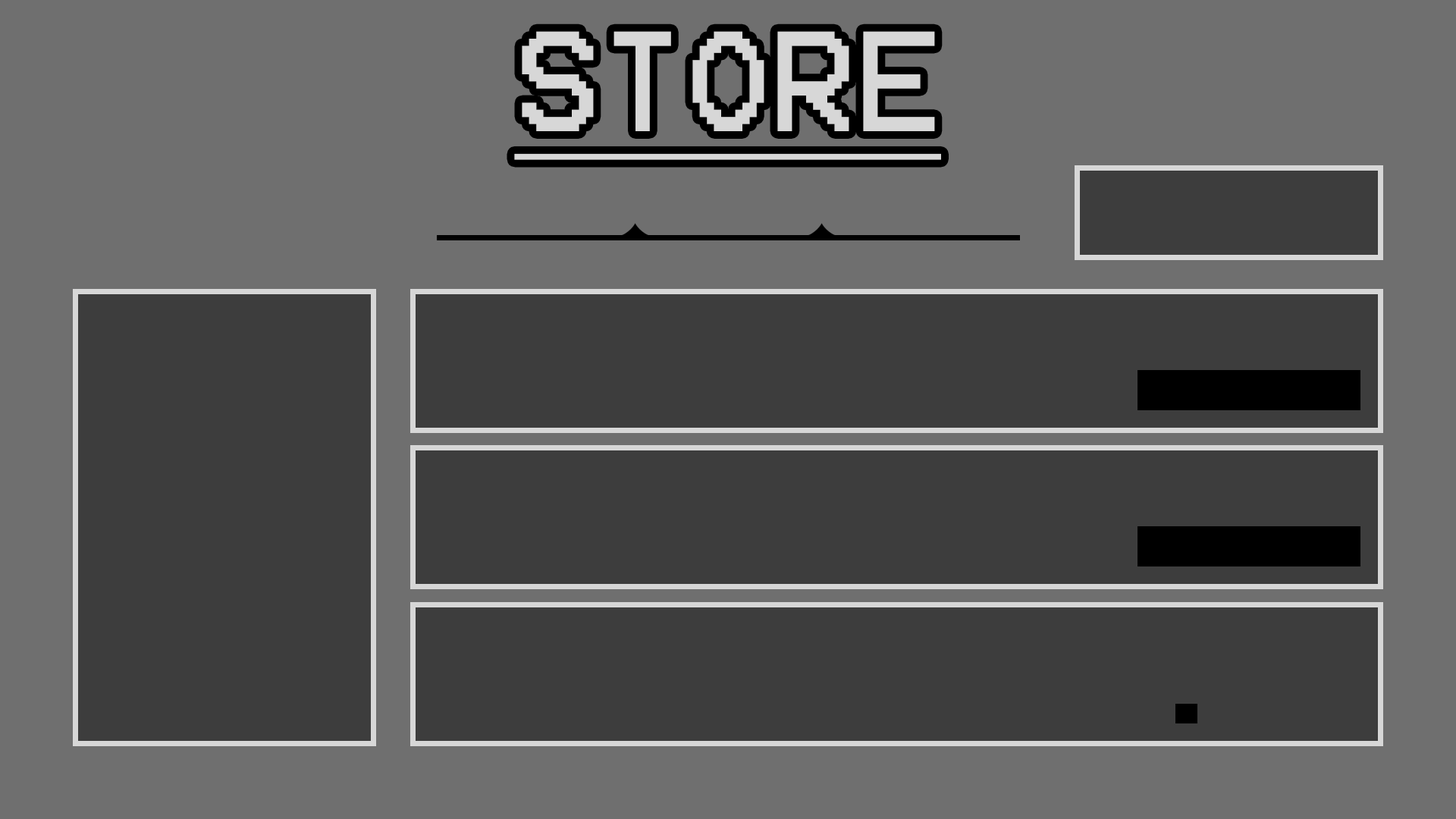
<style>
.page{position:relative;width:1456px;height:819px;background:#6f6f6f}
.page>*{position:absolute;margin:0}
.t1{font:113.7px "Terminal";color:#d7d7d7;text-decoration:underline}
</style>
<div class="page">
<p class="t1" style="left:514px;top:31px;width:427px;height:129px">STORE</p>
</div>
